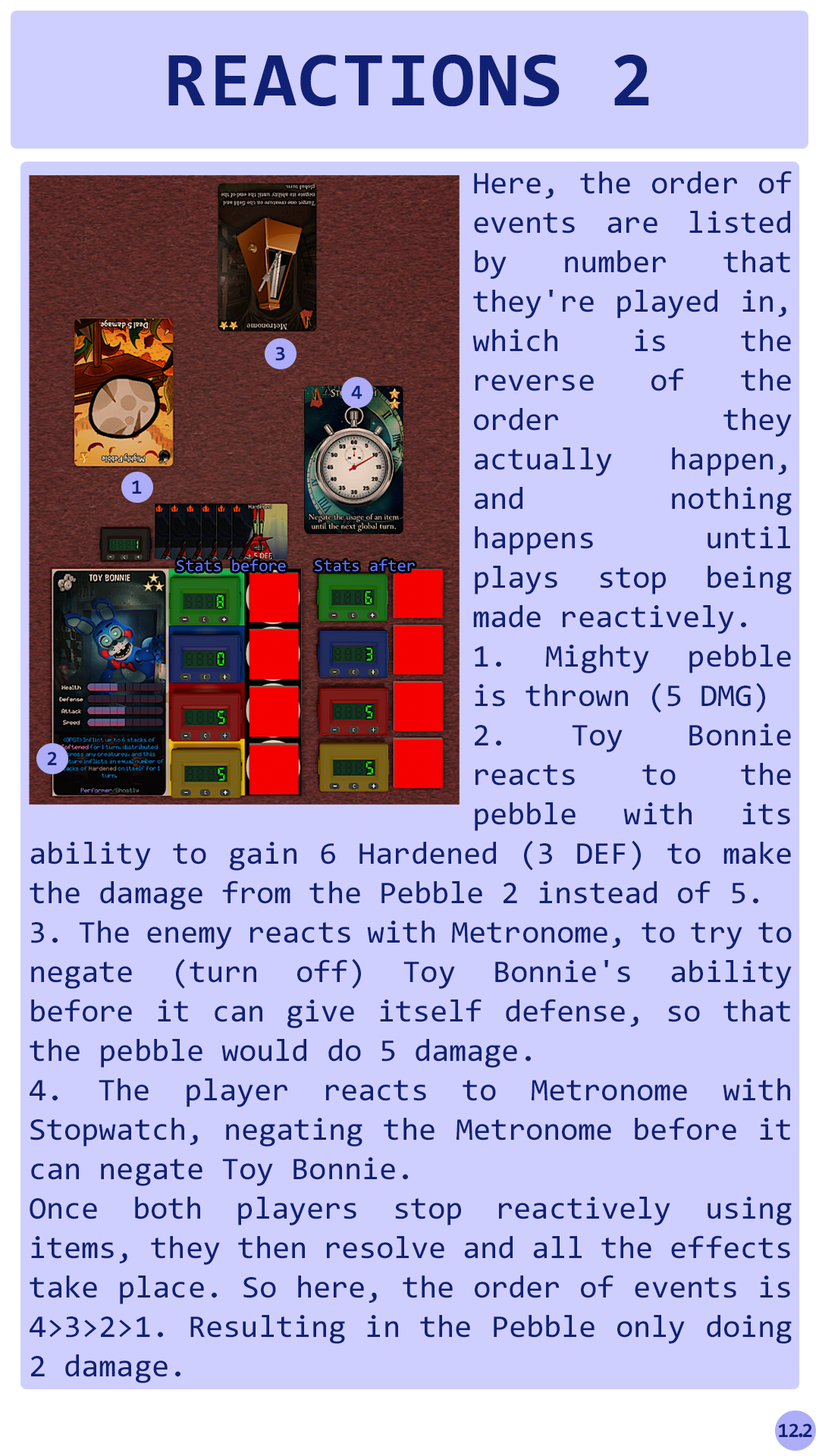
<style>
.page{position:relative;width:819px;height:1456px;background:#cfcfff}
.page>*{position:absolute;margin:0}
.t1{font:78.3px "Consolas-Bold";letter-spacing:0.02em;color:#102175}
.t2{font:31.8px/39.4px "Consolas";color:#102175}
.t3{font:20.5px "Consolas-Bold";color:#102175}
.t4{font:16.7px "Consolas";color:#5f79ff}
.t5{font:20.5px "Consolas-Bold";letter-spacing:-0.06em;color:#102175}
.t6{font:20.5px "Consolas-Bold";letter-spacing:-0.2em;color:#102175}
.t7{font:20.5px "Consolas-Bold";letter-spacing:-0.22em;color:#102175}
</style>
<div class="page">
<p class="t1" style="left:168px;top:55px;width:481px;height:52px">REACTIONS 2</p>
<p class="t2" style="left:30px;top:171px;width:762px;height:1212px;text-align:justify">Here, the order of events are listed by number that they're played in, which is the reverse of the order they actually happen, and nothing happens until plays stop being made reactively. <br>1. Mighty pebble is thrown (5 DMG)<br>2. Toy Bonnie reacts to the pebble with its ability to gain 6 Hardened (3 DEF) to make the damage from the Pebble 2 instead of 5.<br>3. The enemy reacts with Metronome, to try to negate (turn off) Toy Bonnie's ability before it can give itself defense, so that the pebble would do 5 damage.<br>4. The player reacts to Metronome with Stopwatch, negating the Metronome before it can negate Toy Bonnie.<br>Once both players stop reactively using items, they then resolve and all the effects take place. So here, the order of events is 4&gt;3&gt;2&gt;1. Resulting in the Pebble only doing 2 damage.</p>
<p class="t3" style="left:275px;top:347px;width:10px;height:14px">3</p>
<p class="t3" style="left:351px;top:385px;width:11px;height:14px">4</p>
<p class="t3" style="left:132px;top:480px;width:10px;height:14px">1</p>
<p class="t4" style="left:177px;top:559px;width:109px;height:13px">Stats before</p>
<p class="t4" style="left:315px;top:559px;width:100px;height:13px">Stats after</p>
<p class="t3" style="left:47px;top:751px;width:10px;height:14px">2</p>
<p class="t5" style="left:778px;top:1423px;width:34px;height:15px">1<span class="t6">2</span><span class="t7">.</span>2</p>
</div>
